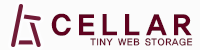
<style>
.page{position:relative;width:200px;height:50px;background:#fbfbfb}
.page>*{position:absolute;margin:0}
.t1{font:30px "YDIYGO160-KSCpc-EUC-H";letter-spacing:0.1em;color:#5f021f}
.t2{font:10px "YDIYGO130-KSCpc-EUC-H";color:#5f021f}
</style>
<div class="page">
<p class="t1" style="left:51px;top:13px;width:141px;height:23px">CELLAR</p>
<p class="t2" style="left:90px;top:38px;width:103px;height:8px">TINY WEB STORAGE</p>
</div>
